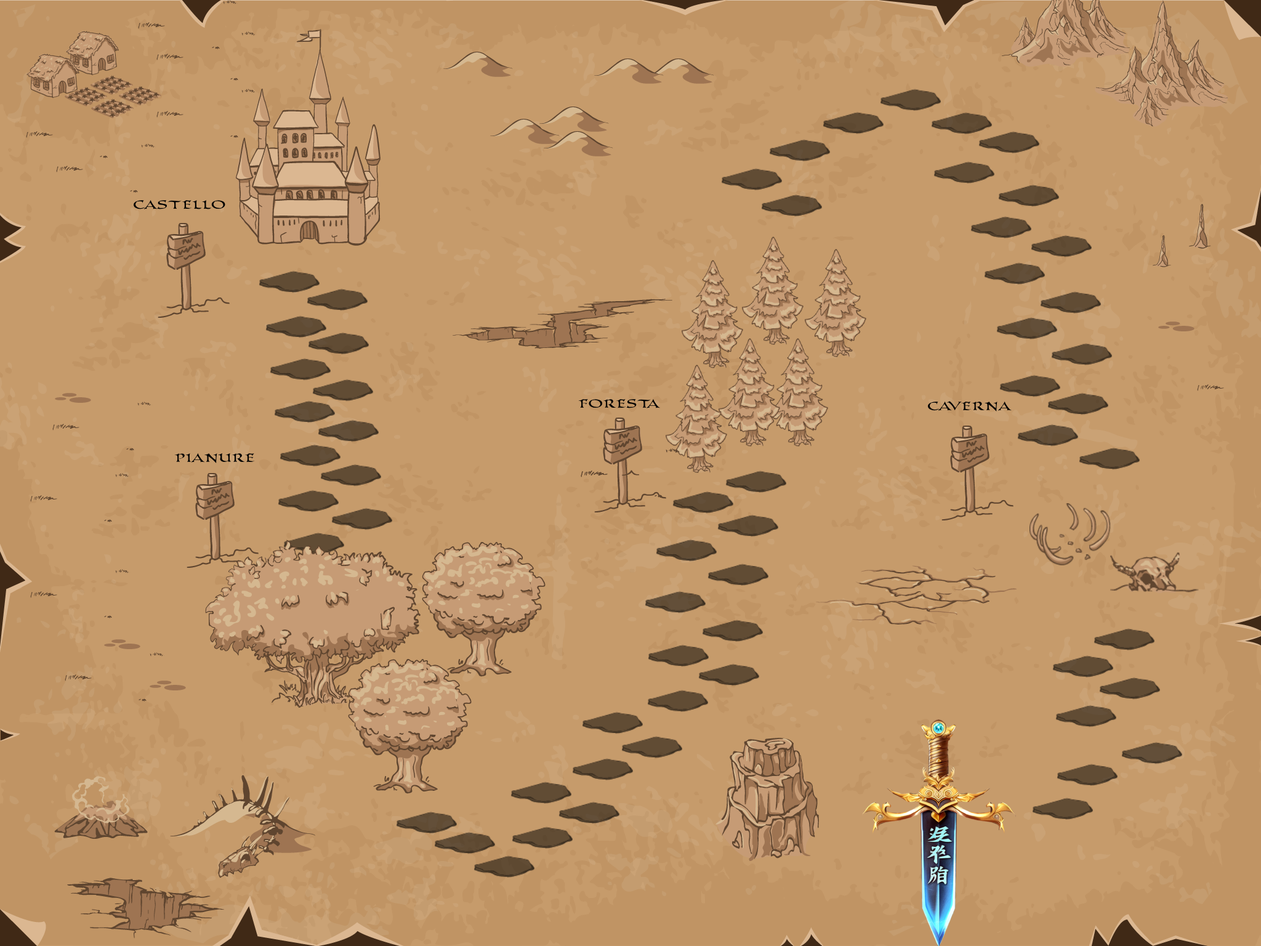
<style>
.page{position:relative;width:1261px;height:946px;background:#c69b6b}
.page>*{position:absolute;margin:0}
.t1{font:14.8px "PR-Columban-demo";color:#000000}
</style>
<div class="page">
<p class="t1" style="left:134px;top:199px;width:91px;height:10px">CASTELLO</p>
<p class="t1" style="left:578px;top:398px;width:82px;height:10px">FORESTA</p>
<p class="t1" style="left:928px;top:401px;width:84px;height:10px">CAVERNA</p>
<p class="t1" style="left:174px;top:453px;width:81px;height:10px">PIANURE</p>
</div>
